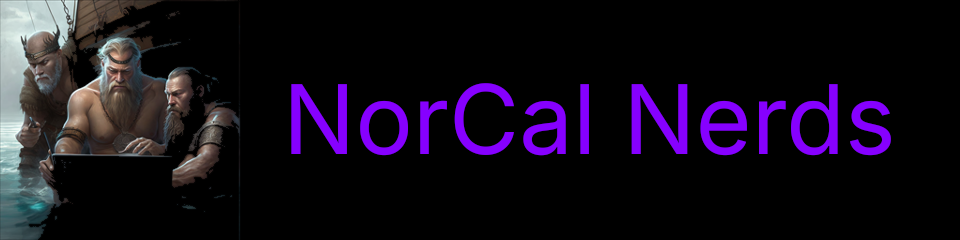
<style>
.page{position:relative;width:960px;height:240px;background:#000000}
.page>*{position:absolute;margin:0}
.t1{font:96px "Inter-Regular";color:#8600ff}
</style>
<div class="page">
<p class="t1" style="left:290px;top:83px;width:602px;height:74px">NorCal Nerds</p>
</div>
